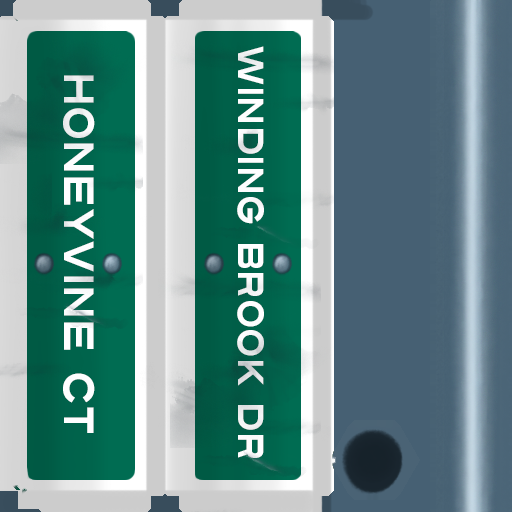
<style>
.page{position:relative;width:512px;height:512px}
.page>*{position:absolute;margin:0}
.t1{font:36px "Turnpike";color:#fefeff;scale:0.75 1}
.t2{font:42px "Turnpike";color:#fefeff;scale:0.75 1}
</style>
<div class="page">
<p class="t1" style="left:237px;top:46px;width:27px;height:412px;rotate:90deg">Winding Brook Dr</p>
<p class="t2" style="left:63px;top:75px;width:32px;height:358px;rotate:90deg">Honeyvine Ct</p>
</div>
